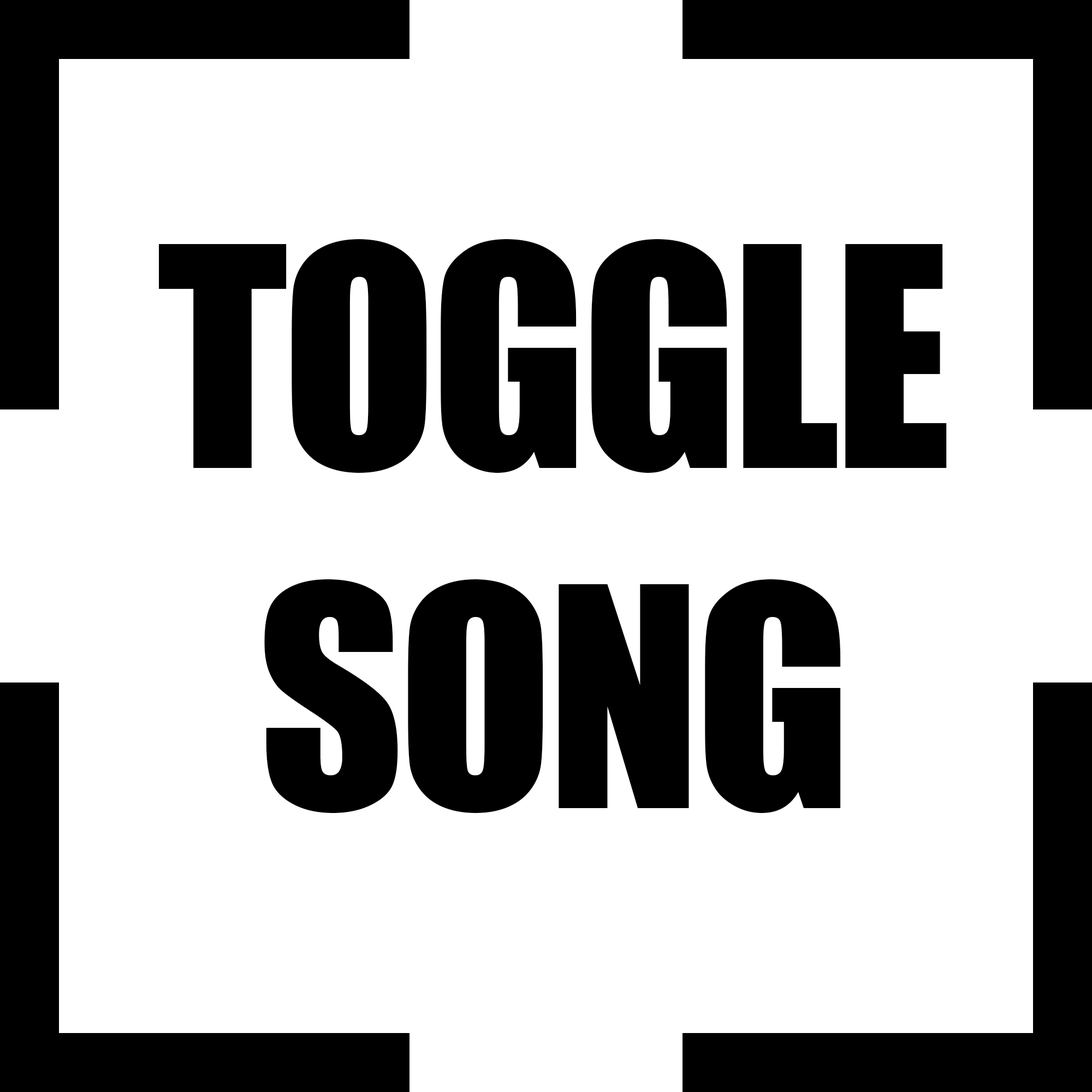
<style>
.page{position:relative;width:1092px;height:1092px;background:#ffffff}
.page>*{position:absolute;margin:0}
.t1{font:283.1px "Impact";letter-spacing:-0.02em;color:#000000}
</style>
<div class="page">
<p class="t1" style="left:159px;top:239px;width:788px;height:574px;text-align:center">TOGGLE<br>SONG</p>
</div>
